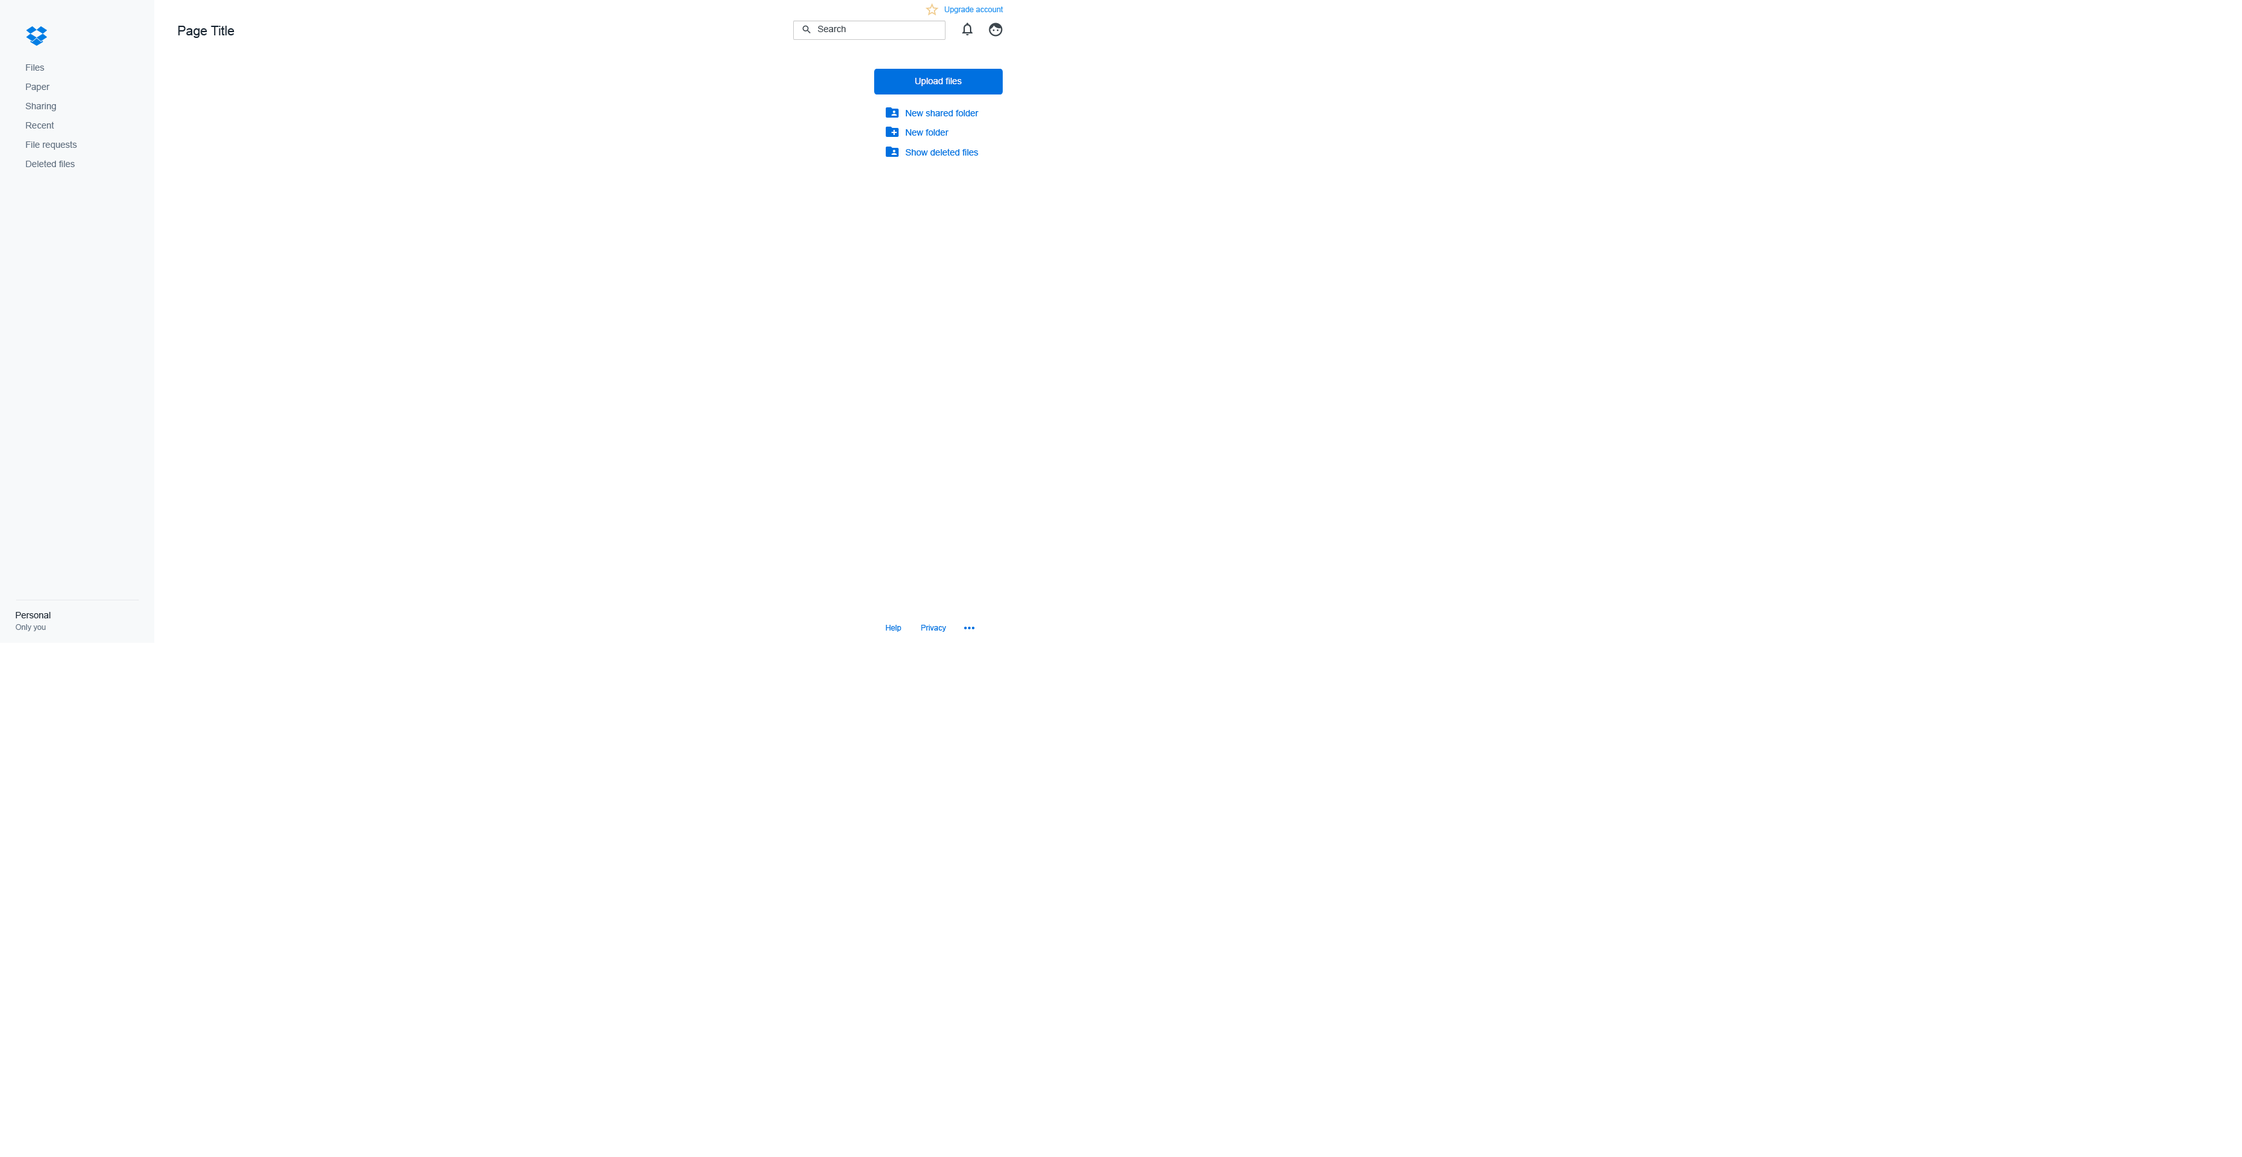
<style>
.page{position:relative;width:2242px;height:1157px;background:#ffffff}
.page>*{position:absolute;margin:0}
.t1{font:7.7px "ArialMT";color:#2895f1}
.t2{font:12.9px "ArialMT";color:#1b2733}
.t3{font:9px "ArialMT";color:#3d464d}
.t4{font:9px "ArialMT";color:#637282}
.t5{font:9px "ArialMT";color:#ffffff}
.t6{font:9px "ArialMT";color:#0070e0}
.t7{font:9px "ArialMT";color:#1b2733}
.t8{font:7.7px "ArialMT";color:#637282}
.t9{font:7.7px "ArialMT";color:#0070e0}
</style>
<div class="page">
<p class="t1" style="left:944px;top:6px;width:60px;height:8px">Upgrade account</p>
<p class="t2" style="left:178px;top:26px;width:57px;height:12px">Page Title</p>
<p class="t3" style="left:818px;top:26px;width:28px;height:6px">Search</p>
<p class="t4" style="left:26px;top:64px;width:18px;height:7px">Files</p>
<p class="t5" style="left:915px;top:78px;width:47px;height:8px">Upload files</p>
<p class="t4" style="left:26px;top:84px;width:24px;height:8px">Paper</p>
<p class="t4" style="left:26px;top:103px;width:30px;height:8px">Sharing</p>
<p class="t6" style="left:906px;top:110px;width:73px;height:6px">New shared folder</p>
<p class="t4" style="left:26px;top:122px;width:28px;height:7px">Recent</p>
<p class="t6" style="left:906px;top:129px;width:43px;height:7px">New folder</p>
<p class="t4" style="left:26px;top:141px;width:51px;height:9px">File requests</p>
<p class="t6" style="left:906px;top:148px;width:72px;height:8px">Show deleted files</p>
<p class="t4" style="left:26px;top:160px;width:49px;height:7px">Deleted files</p>
<p class="t7" style="left:15px;top:612px;width:36px;height:6px">Personal</p>
<p class="t8" style="left:15px;top:624px;width:31px;height:7px">Only you</p>
<p class="t9" style="left:886px;top:625px;width:15px;height:7px">Help</p>
<p class="t9" style="left:921px;top:625px;width:25px;height:7px">Privacy</p>
</div>
